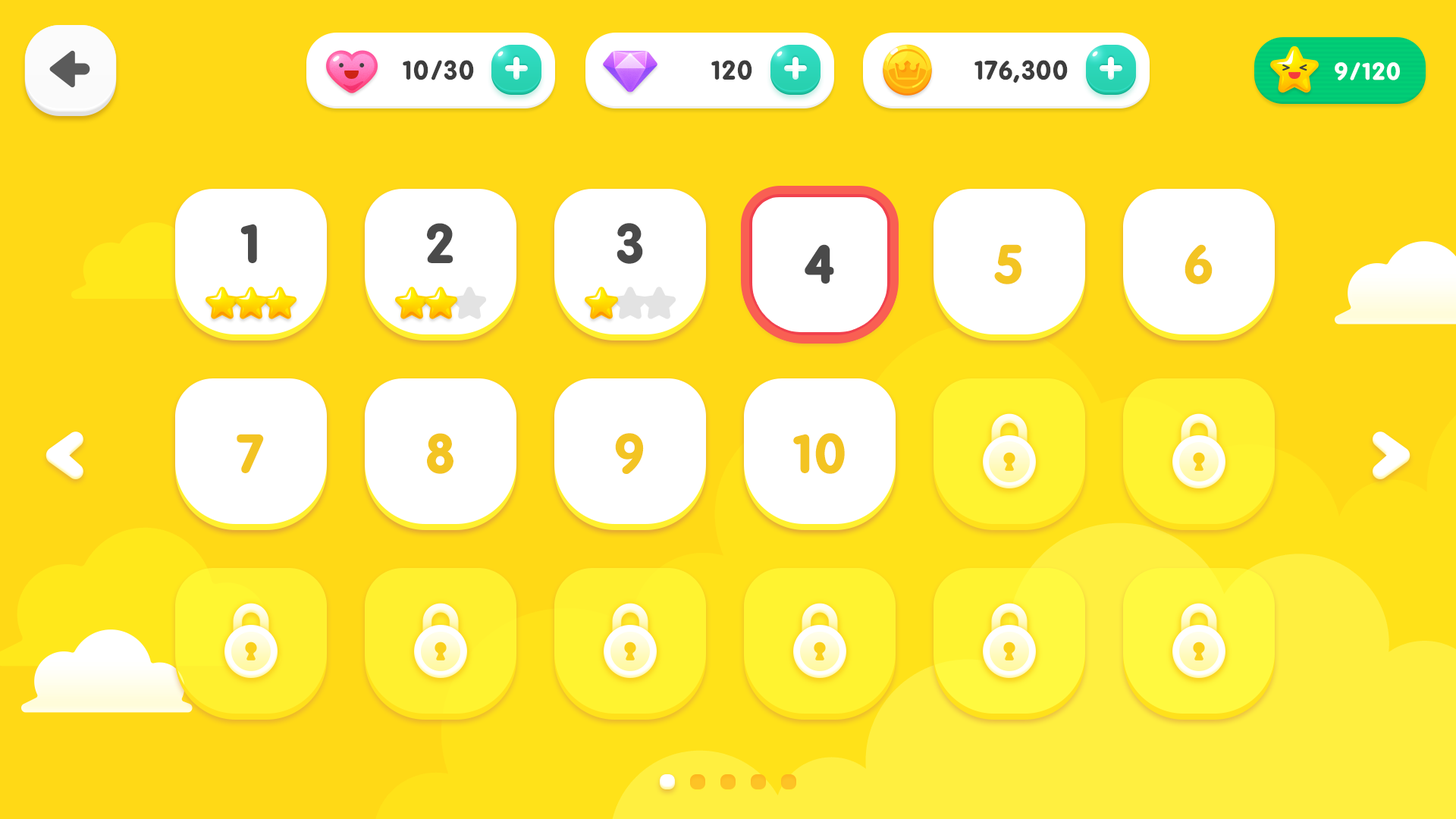
<style>
.page{position:relative;width:1456px;height:819px;background:#ffd916}
.page>*{position:absolute;margin:0}
.t1{font:25.2px "BPreplay-Bold";color:#3d3d3d;scale:1.05 1}
.t2{font:22.7px "BPreplay-Bold";color:#ffffff;scale:1.09 1}
.t3{font:51.9px "BPreplay-Bold";color:#4a4a4a;scale:1.05 1}
.t4{font:51.9px "BPreplay-Bold";color:#f3c423;scale:1.05 1}
</style>
<div class="page">
<p class="t1" style="left:403px;top:60px;width:71px;height:20px">10/30</p>
<p class="t1" style="left:711px;top:60px;width:41px;height:20px">120</p>
<p class="t1" style="left:974px;top:60px;width:94px;height:23px">176,300</p>
<p class="t2" style="left:1335px;top:62px;width:65px;height:18px">9/120</p>
<p class="t3" style="left:240px;top:224px;width:17px;height:39px">1</p>
<p class="t3" style="left:427px;top:223px;width:26px;height:40px">2</p>
<p class="t3" style="left:617px;top:223px;width:26px;height:41px">3</p>
<p class="t3" style="left:805px;top:244px;width:29px;height:40px">4</p>
<p class="t4" style="left:994px;top:244px;width:27px;height:40px">5</p>
<p class="t4" style="left:1185px;top:244px;width:28px;height:40px">6</p>
<p class="t4" style="left:237px;top:434px;width:27px;height:39px">7</p>
<p class="t4" style="left:427px;top:433px;width:26px;height:41px">8</p>
<p class="t4" style="left:615px;top:433px;width:29px;height:41px">9</p>
<p class="t4" style="left:793px;top:433px;width:52px;height:41px">10</p>
</div>
